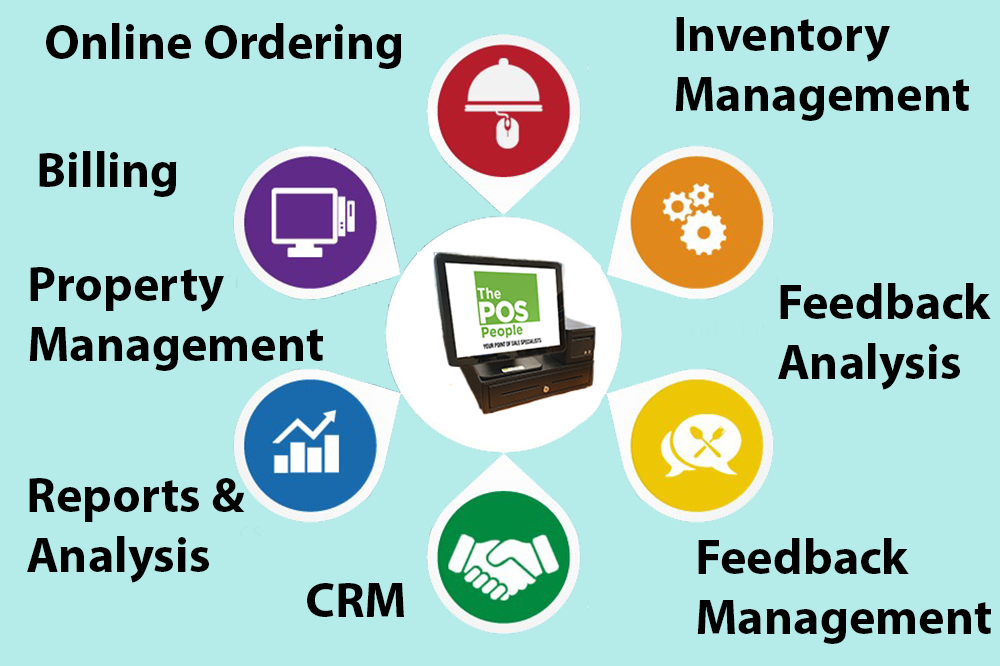
<style>
.page{position:relative;width:1000px;height:666px;background:#b5ebe8}
.page>*{position:absolute;margin:0}
.t1{font:50px "MyriadPro-Bold";color:#000000}
</style>
<div class="page">
<p class="t1" style="left:675px;top:17px;width:294px;height:104px">Inventory<br>Management</p>
<p class="t1" style="left:46px;top:23px;width:356px;height:46px">Online Ordering</p>
<p class="t1" style="left:39px;top:151px;width:138px;height:46px">Billing</p>
<p class="t1" style="left:29px;top:267px;width:294px;height:104px">Property <br>Management</p>
<p class="t1" style="left:778px;top:283px;width:213px;height:107px">Feedback<br>Analysis</p>
<p class="t1" style="left:27px;top:478px;width:218px;height:105px">Reports &amp;<br>Analysis</p>
<p class="t1" style="left:697px;top:538px;width:294px;height:106px">Feedback<br>Management</p>
<p class="t1" style="left:307px;top:583px;width:97px;height:34px">CRM</p>
</div>
